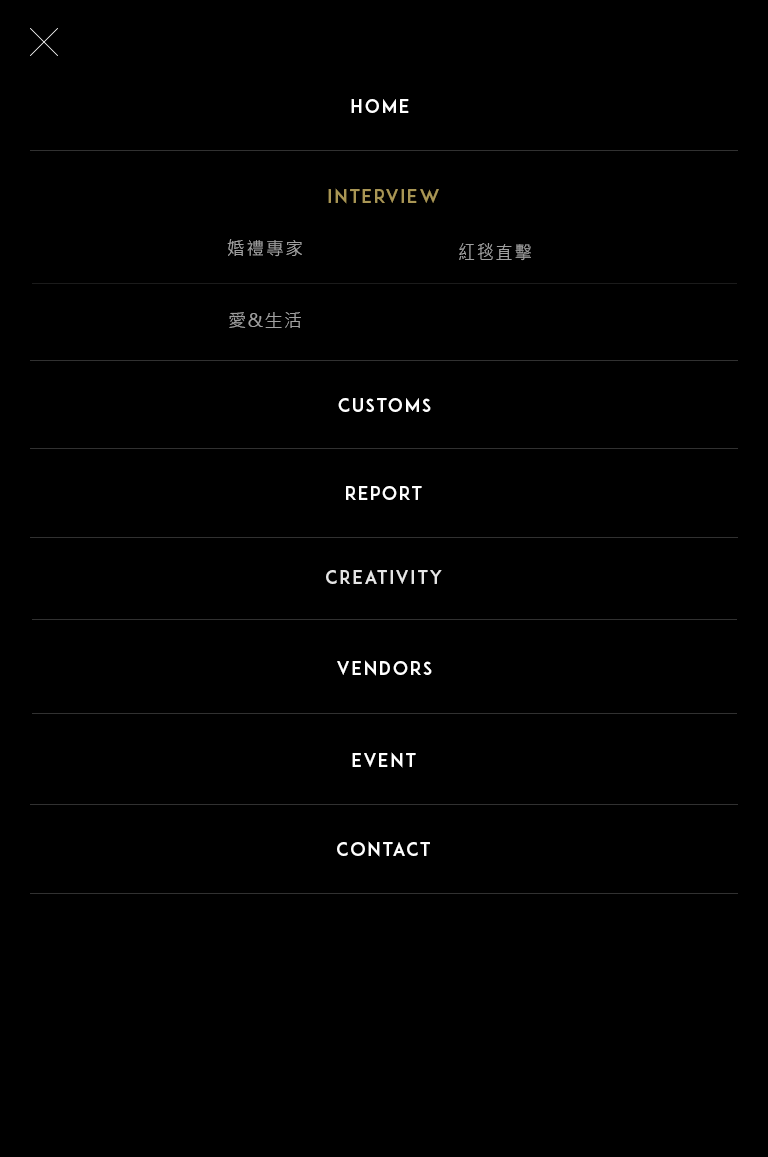
<style>
.page{position:relative;width:768px;height:1157px;background:#000000}
.page>*{position:absolute;margin:0}
.t1{font:18px "ADAM.CGPRO";letter-spacing:0.1em;color:#ffffff}
.t2{font:18px "ADAM.CGPRO";letter-spacing:0.1em;color:#a99655}
.t3{font:18px/72px "MicrosoftJhengHeiRegular";letter-spacing:0.08em;color:#a0a0a0}
.t4{font:18px "MicrosoftJhengHeiRegular";letter-spacing:0.08em;color:#a0a0a0;scale:0.97 1}
.t5{font:18px "ADAM.CGPRO";letter-spacing:0.1em;color:#e6e6e6}
</style>
<div class="page">
<p class="t1" style="left:351px;top:99px;width:58px;height:14px">HOME</p>
<p class="t2" style="left:328px;top:188px;width:111px;height:16px">INTERVIEW</p>
<p class="t3" style="left:227px;top:239px;width:75px;height:89px;text-align:center">婚禮專家<br>愛&amp;生活</p>
<p class="t4" style="left:459px;top:243px;width:72px;height:18px">紅毯直擊</p>
<p class="t1" style="left:338px;top:398px;width:93px;height:14px">cUSTOMS</p>
<p class="t1" style="left:346px;top:486px;width:76px;height:14px">report</p>
<p class="t5" style="left:326px;top:570px;width:116px;height:14px">cREATIVITY</p>
<p class="t1" style="left:337px;top:660px;width:95px;height:16px">vendors</p>
<p class="t1" style="left:352px;top:752px;width:64px;height:16px">EVENT</p>
<p class="t1" style="left:337px;top:841px;width:93px;height:16px">CONTACT</p>
</div>
